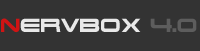
<style>
.page{position:relative;width:200px;height:51px;background:#333333}
.page>*{position:absolute;margin:0}
.t1{font:18px "TerminatorRealNFI";color:#e8e8e8}
.t2{font:18px "TerminatorRealNFI";color:#d01414}
.t3{font:18px "TerminatorRealNFI";color:#5d5d5d}
</style>
<div class="page">
<p class="t1" style="left:1px;top:18px;width:196px;height:15px"><span class="t2">N</span>ervBox <span class="t3">4.0</span></p>
</div>
